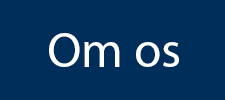
<style>
.page{position:relative;width:225px;height:100px;background:#002e5a}
.page>*{position:absolute;margin:0}
.t1{font:12px "MyriadPro-Regular";color:#ffffff}
</style>
<div class="page">
<p class="t1" style="left:49px;top:33px;width:130px;height:34px">Om os</p>
</div>
